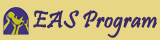
<style>
.page{position:relative;width:160px;height:40px;background:#e7d683}
.page>*{position:absolute;margin:0}
.t1{font:24px "Pristina-Regular";color:#3a2b68;font-weight:bold}
</style>
<div class="page">
<p class="t1" style="left:33px;top:10px;width:124px;height:28px">EAS Program</p>
</div>
